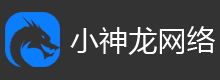
<style>
.page{position:relative;width:220px;height:80px;background:#333333}
.page>*{position:absolute;margin:0}
.t1{font:29.2px "MicrosoftYaHei";color:#ffffff}
</style>
<div class="page">
<p class="t1" style="left:70px;top:26px;width:145px;height:29px">小神龙网络</p>
</div>
